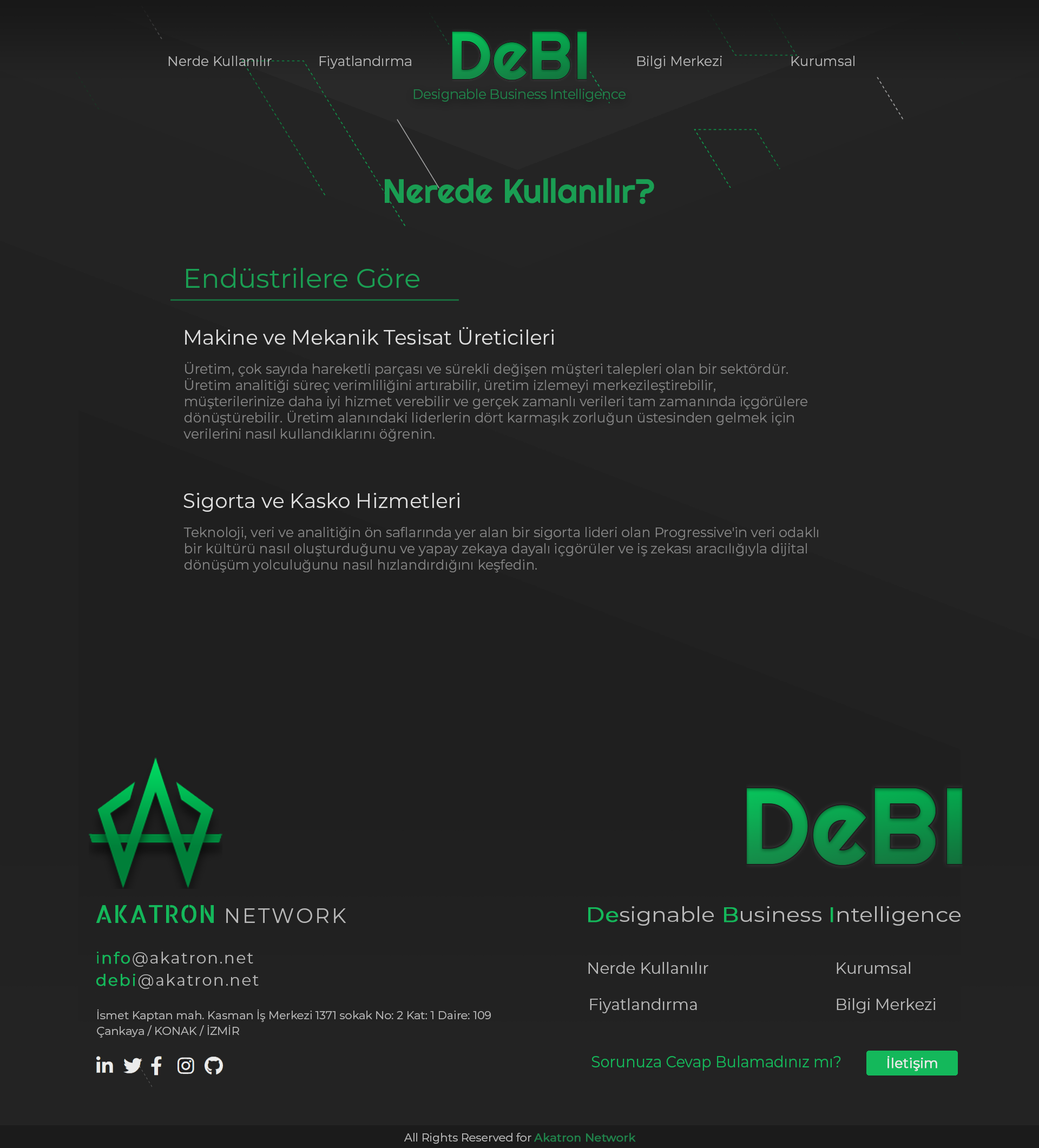
<style>
.page{position:relative;width:1039px;height:1148px;background:#232323}
.page>*{position:absolute;margin:0}
.t1{font:13.5px "Montserrat-Regular";color:#b6b6b6}
.t2{font:13.5px "Montserrat-Regular";color:#b7b7b7}
.t3{font:13.5px "Montserrat-Regular";letter-spacing:-0.025em;color:#20834b}
.t4{font:33.8px "Righteous-Regular";color:#1a9e53}
.t5{font:27px "Montserrat-Regular";color:#1a9e53}
.t6{font:20.3px "Montserrat-Regular";color:#dfdfdf}
.t7{font:13.5px "Montserrat-Regular";color:#858585}
.t8{font:24.8px "AllertaStencil-Regular";color:#14b85b}
.t9{font:20.3px "Montserrat-Regular";letter-spacing:0.1em;color:#b9b9b9}
.t10{font:20.5px "Montserrat-Regular";color:#b9b9b9;scale:1.1 1}
.t11{font:20.5px "Montserrat-Regular";color:#14b85b;font-weight:bold;scale:1.1 1}
.t12{font:15.8px/22.5px "Montserrat-Regular";letter-spacing:0.08em;color:#b9b9b9}
.t13{font:15.8px/22.5px "Montserrat-Regular";letter-spacing:0.08em;color:#14b85b}
.t14{font:15.8px/22.5px "Montserrat-Regular";letter-spacing:0.08em;color:#14b85b;font-weight:bold}
.t15{font:15.8px "Montserrat-Regular";color:#b9b9b9}
.t16{font:11.3px/15.8px "Montserrat-Regular";color:#b9b9b9}
.t17{font:15.8px "Montserrat-Regular";color:#14b85b;scale:0.94 1}
.t18{font:13.5px "Montserrat-Regular";color:#ebebeb;font-weight:bold}
.t19{font:11.3px "Montserrat-Regular";color:#b9b9b9}
.t20{font:11.3px "Montserrat-Regular";color:#20834b;font-weight:bold}
</style>
<div class="page">
<p class="t1" style="left:168px;top:56px;width:104px;height:10px">Nerde Kullanılır</p>
<p class="t2" style="left:319px;top:56px;width:92px;height:13px">Fiyatlandırma</p>
<p class="t2" style="left:637px;top:56px;width:85px;height:13px">Bilgi Merkezi</p>
<p class="t1" style="left:791px;top:56px;width:63px;height:10px">Kurumsal</p>
<p class="t3" style="left:413px;top:89px;width:212px;height:13px">Designable Business Intelligence</p>
<p class="t4" style="left:385px;top:178px;width:269px;height:26px">Nerede Kullanılır?</p>
<p class="t5" style="left:186px;top:268px;width:233px;height:20px">Endüstrilere Göre</p>
<p class="t6" style="left:185px;top:327px;width:368px;height:18px">Makine ve Mekanik Tesisat Üreticileri</p>
<p class="t7" style="left:183px;top:362px;width:624px;height:79px">Üretim, çok sayıda hareketli parçası ve sürekli değişen müşteri talepleri olan bir sektördür. <br>Üretim analitiği süreç verimliliğini artırabilir, üretim izlemeyi merkezileştirebilir, <br>müşterilerinize daha iyi hizmet verebilir ve gerçek zamanlı verileri tam zamanında içgörülere <br>dönüştürebilir. Üretim alanındaki liderlerin dört karmaşık zorluğun üstesinden gelmek için <br>verilerini nasıl kullandıklarını öğrenin.</p>
<p class="t6" style="left:183px;top:493px;width:276px;height:19px">Sigorta ve Kasko Hizmetleri</p>
<p class="t7" style="left:183px;top:527px;width:635px;height:46px">Teknoloji, veri ve analitiğin ön saflarında yer alan bir sigorta lideri olan Progressive'in veri odaklı <br>bir kültürü nasıl oluşturduğunu ve yapay zekaya dayalı içgörüler ve iş zekası aracılığıyla dijital <br>dönüşüm yolculuğunu nasıl hızlandırdığını keşfedin.</p>
<p class="t8" style="left:96px;top:905px;width:118px;height:18px">AKATRON</p>
<p class="t9" style="left:226px;top:908px;width:120px;height:15px">NETWORK</p>
<p class="t10" style="left:588px;top:906px;width:372px;height:20px"><span class="t11">De</span>signable <span class="t11">B</span>usiness <span class="t11">I</span>ntelligence</p>
<p class="t12" style="left:96px;top:952px;width:163px;height:37px"><span class="t13">i</span><span class="t14">nfo</span>@akatron.net<br><span class="t14">debi</span>@akatron.net</p>
<p class="t15" style="left:588px;top:962px;width:120px;height:12px">Nerde Kullanılır</p>
<p class="t15" style="left:836px;top:962px;width:74px;height:12px">Kurumsal</p>
<p class="t15" style="left:590px;top:998px;width:107px;height:15px">Fiyatlandırma</p>
<p class="t15" style="left:836px;top:998px;width:99px;height:15px">Bilgi Merkezi</p>
<p class="t16" style="left:97px;top:1009px;width:394px;height:29px">İsmet Kaptan mah. Kasman İş Merkezi 1371 sokak No: 2 Kat: 1 Daire: 109<br>Çankaya / KONAK / İZMİR</p>
<p class="t17" style="left:591px;top:1055px;width:250px;height:16px">Sorunuza Cevap Bulamadınız mı?</p>
<p class="t18" style="left:887px;top:1056px;width:50px;height:15px">İletişim</p>
<p class="t19" style="left:404px;top:1133px;width:232px;height:11px">All Rights Reserved for <span class="t20">Akatron Network</span></p>
</div>
